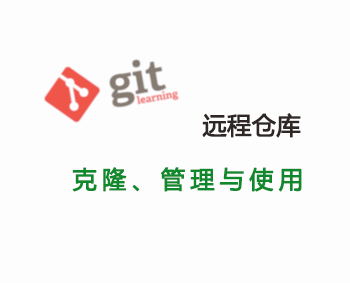
<style>
.page{position:relative;width:350px;height:283px;background:#fdfdfd}
.page>*{position:absolute;margin:0}
.t1{font:24px "MicrosoftYaHei";color:#2e2725;font-weight:bold}
.t2{font:24px "MicrosoftYaHei";letter-spacing:0.2em;color:#0f892b;font-weight:bold}
</style>
<div class="page">
<p class="t1" style="left:202px;top:113px;width:99px;height:25px">远程仓库</p>
<p class="t2" style="left:72px;top:167px;width:230px;height:25px">克隆、管理与使用</p>
</div>
